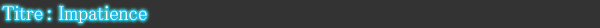
<style>
.page{position:relative;width:600px;height:28px;background:#333333}
.page>*{position:absolute;margin:0}
.t1{font:20px "MS-PMincho";color:#ffffff}
</style>
<div class="page">
<p class="t1" style="left:2px;top:6px;width:145px;height:17px">Titre : Impatience</p>
</div>
